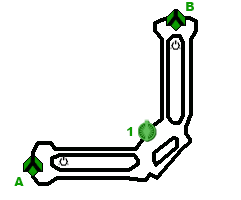
<style>
.page{position:relative;width:241px;height:200px;background:#ffffff}
.page>*{position:absolute;margin:0}
.t1{font:12px "Arial-Black";color:#0d9e01}
</style>
<div class="page">
<p class="t1" style="left:186px;top:2px;width:8px;height:9px">B</p>
<p class="t1" style="left:127px;top:127px;width:6px;height:9px">1</p>
<p class="t1" style="left:14px;top:177px;width:10px;height:9px">A</p>
</div>
